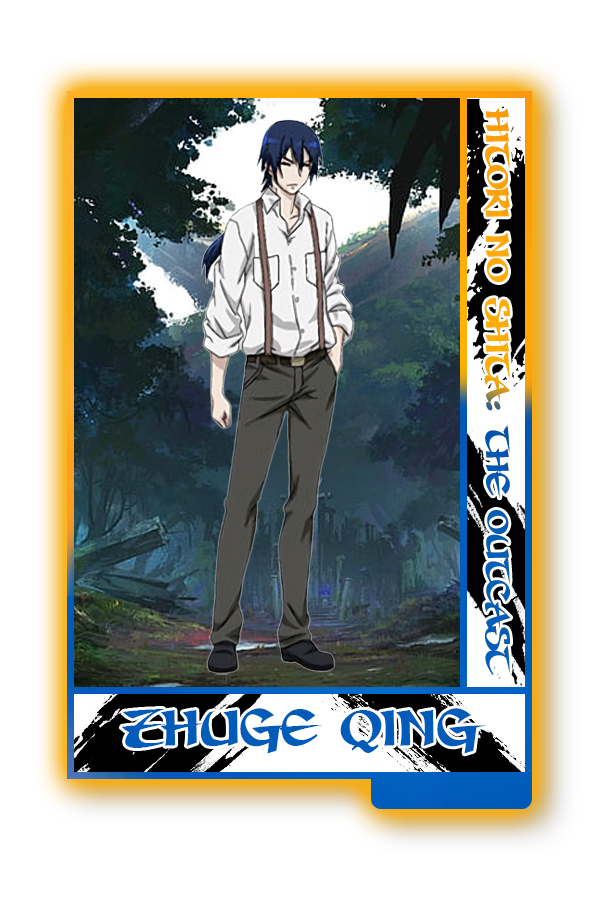
<style>
.page{position:relative;width:600px;height:900px;background:#ffffff}
.page>*{position:absolute;margin:0}
.t1{font:36.7px "SevenSwordsmenBB"}
.t2{font:58.4px "SevenSwordsmenBB";color:#005bb9}
</style>
<div class="page">
<p class="t1" style="left:483px;top:108px;width:28px;height:567px;rotate:90deg">HITORI NO SHITA: THE OUTCAST</p>
<p class="t2" style="left:121px;top:708px;width:365px;height:46px">Zhuge Qing</p>
</div>
